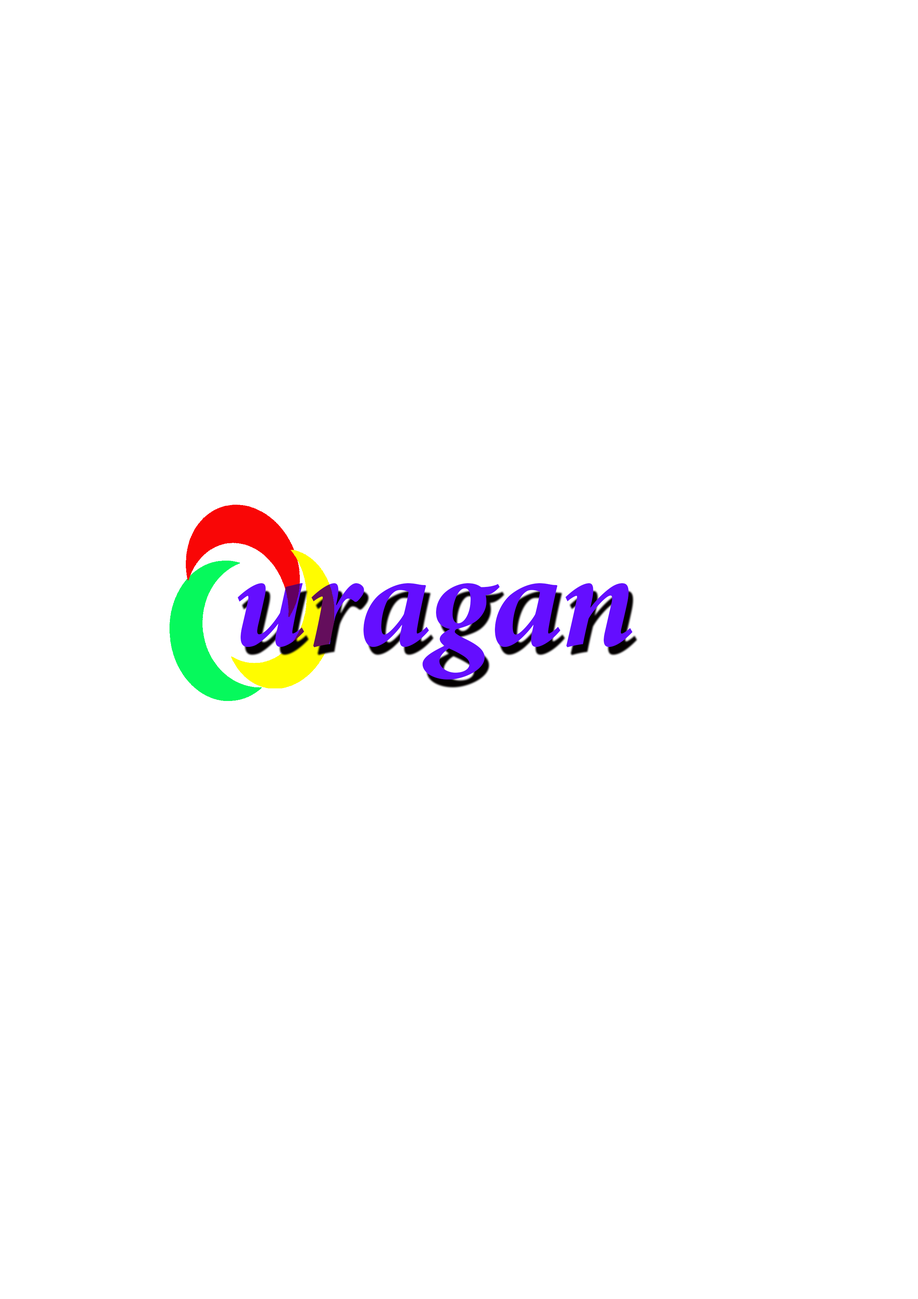
<style>
.page{position:relative;width:918px;height:1299px;background:#ffffff}
.page>*{position:absolute;margin:0}
.t1{font:192px "AdobeArabic-BoldItalic";color:#640eff}
</style>
<div class="page">
<p class="t1" style="left:238px;top:583px;width:395px;height:96px">uragan</p>
</div>
